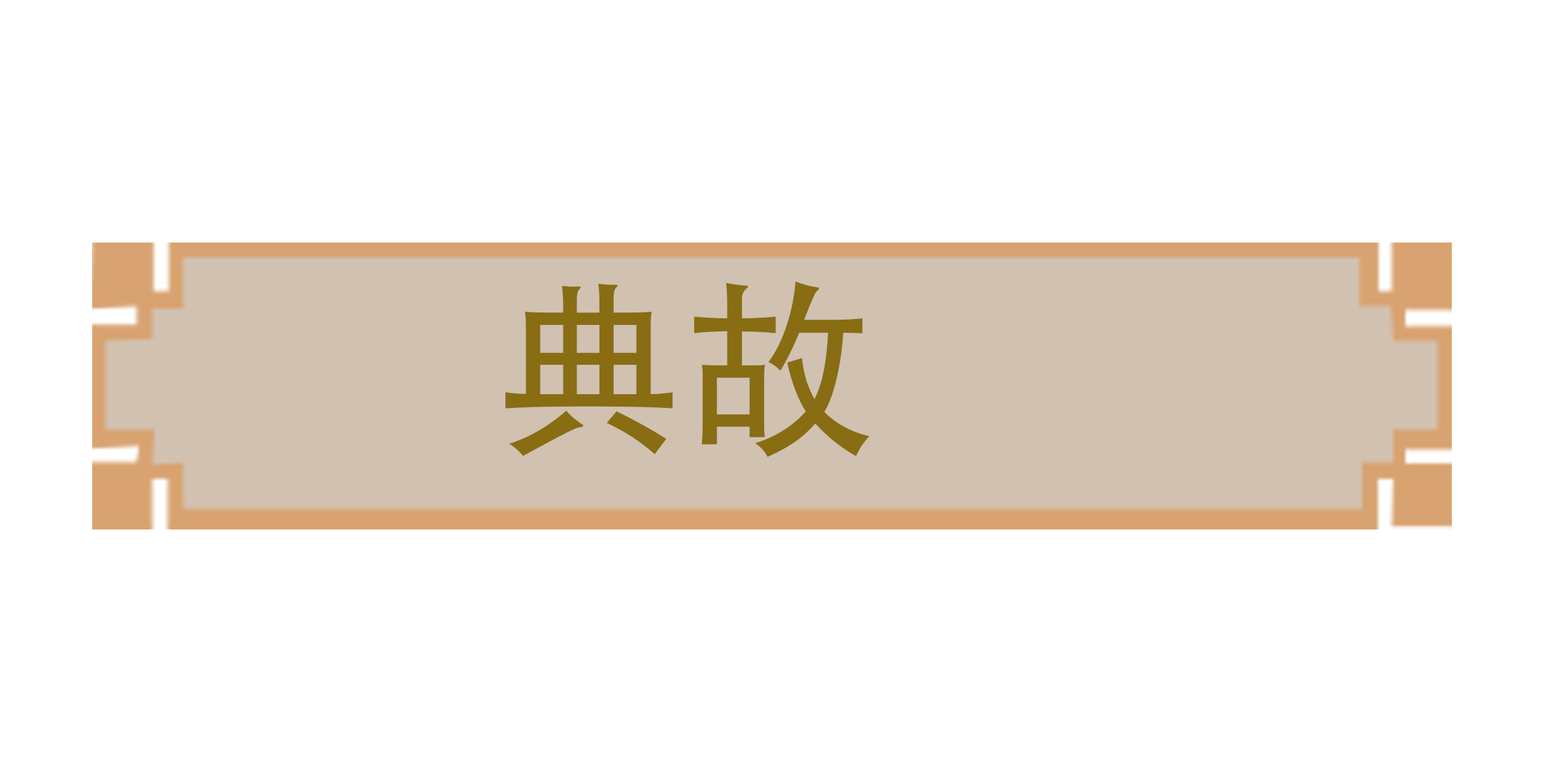
<style>
.page{position:relative;width:1544px;height:772px;background:#ffffff}
.page>*{position:absolute;margin:0}
.t1{font:189.6px "AdobeHeitiStd-Regular";color:#886d13}
</style>
<div class="page">
<p class="t1" style="left:505px;top:281px;width:365px;height:176px">典故</p>
</div>
